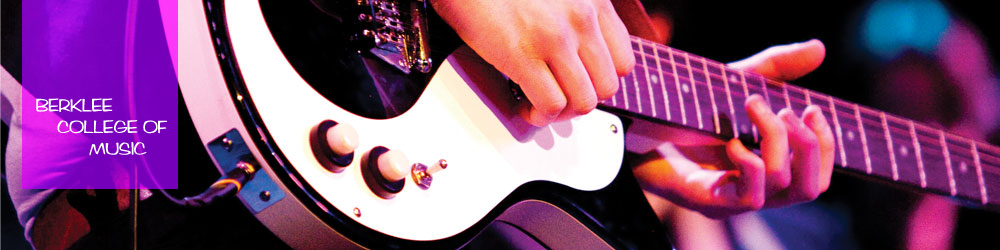
<style>
.page{position:relative;width:1000px;height:250px}
.page>*{position:absolute;margin:0}
.t1{font:18px "Arctic-Regular";color:#ffffff}
.t2{font:18px "AngieBareFoot";color:#ffffff}
</style>
<div class="page">
<p class="t1" style="left:36px;top:30px;width:142px;height:145px"><span class="t2">         <br><br><br></span>BERKLEE <br>    COLLEGE OF <br>          MUSIC</p>
</div>
